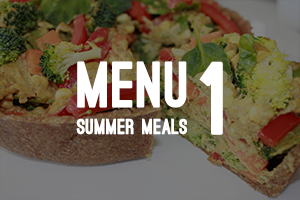
<style>
.page{position:relative;width:300px;height:200px}
.page>*{position:absolute;margin:0}
.t1{font:60px "OstrichSans-Black";letter-spacing:0.013em;color:#ffffff;font-weight:bold}
.t2{font:95px "OstrichSans-Black";letter-spacing:0.013em;color:#ffffff;font-weight:bold}
.t3{font:20px "OstrichSans-Black";letter-spacing:0.013em;color:#ffffff;font-weight:bold}
</style>
<div class="page">
<p class="t1" style="left:77px;top:61px;width:110px;height:47px">Menu</p>
<p class="t2" style="left:199px;top:61px;width:24px;height:74px">1</p>
<p class="t3" style="left:76px;top:118px;width:111px;height:17px">summer meals</p>
</div>
